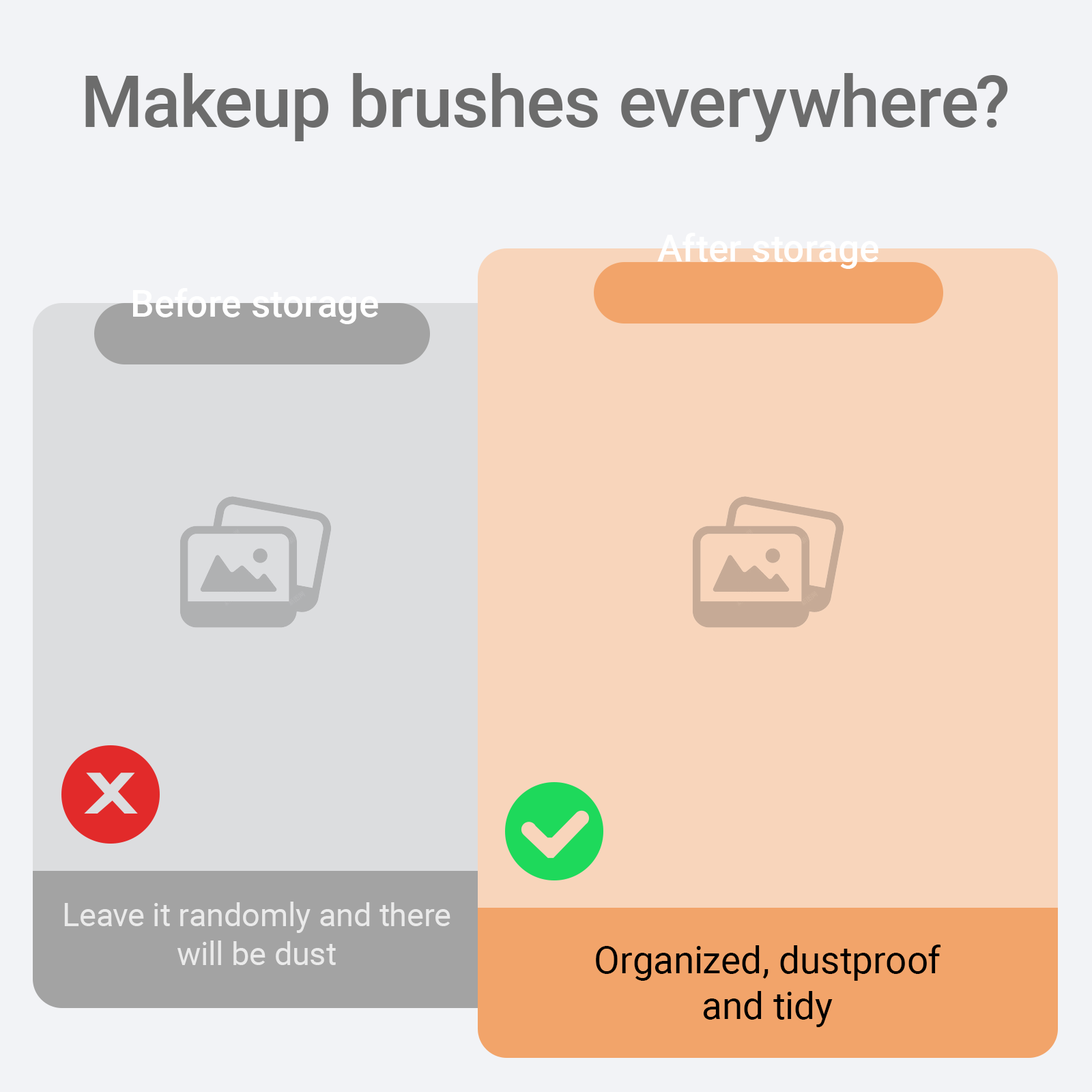
<style>
.page{position:relative;width:1092px;height:1092px;background:#f2f3f6}
.page>*{position:absolute;margin:0}
.t1{font:71.3px "Roboto-Medium";color:#6c6c6c}
.t2{font:37.9px "Roboto-Medium";color:#ffffff}
.t3{font:32px "Roboto-Regular";color:#ffffff}
.t4{font:37.9px "Roboto-Regular";color:#000000}
</style>
<div class="page">
<p class="t1" style="left:85px;top:73px;width:923px;height:69px">Makeup brushes everywhere?</p>
<p class="t2" style="left:657px;top:233px;width:221px;height:36px">After storage</p>
<p class="t2" style="left:133px;top:288px;width:245px;height:36px">Before storage</p>
<p class="t3" style="left:64px;top:902px;width:386px;height:63px;text-align:center;opacity:0.75">Leave it randomly and there will be dust</p>
<p class="t4" style="left:596px;top:945px;width:345px;height:82px;text-align:center">Organized, dustproof and tidy</p>
</div>
